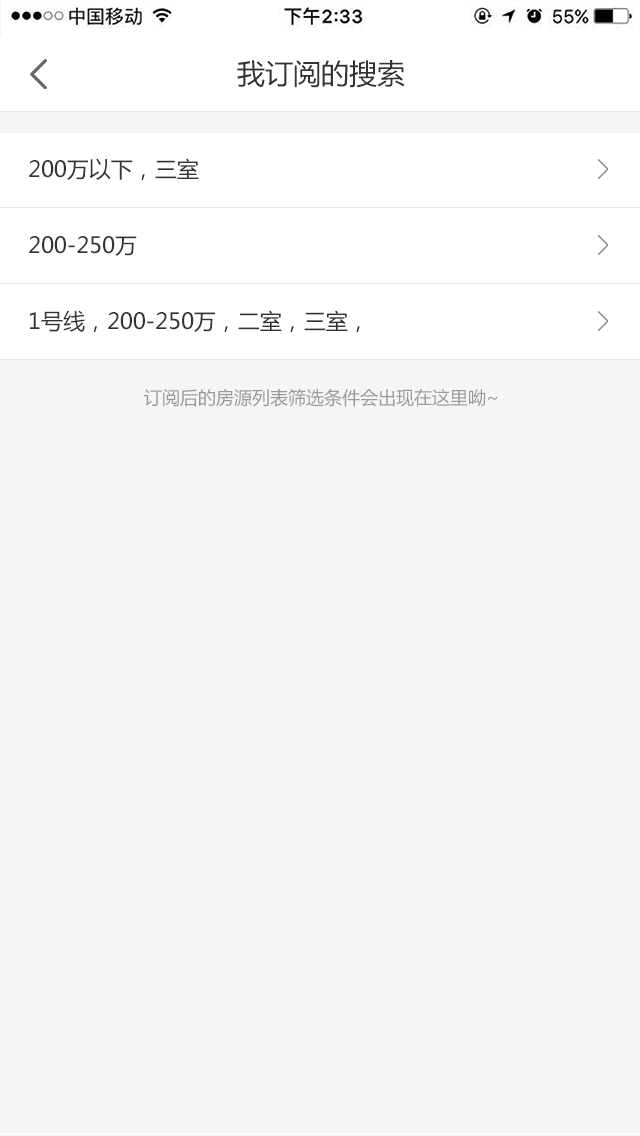
<style>
.page{position:relative;width:640px;height:1136px;background:#f5f5f5}
.page>*{position:absolute;margin:0}
.t1{font:28px "MicrosoftYaHei";color:#333333}
.t2{font:22px "MicrosoftYaHei";color:#333333}
.t3{font:18px "MicrosoftYaHei";color:#999999}
</style>
<div class="page">
<p class="t1" style="left:237px;top:60px;width:168px;height:28px">我订阅的搜索</p>
<p class="t2" style="left:29px;top:158px;width:170px;height:22px">200万以下，三室</p>
<p class="t2" style="left:29px;top:236px;width:108px;height:20px">200-250万</p>
<p class="t2" style="left:30px;top:310px;width:330px;height:22px">1号线，200-250万，二室，三室，</p>
<p class="t3" style="left:144px;top:388px;width:354px;height:19px">订阅后的房源列表筛选条件会出现在这里呦~</p>
</div>
